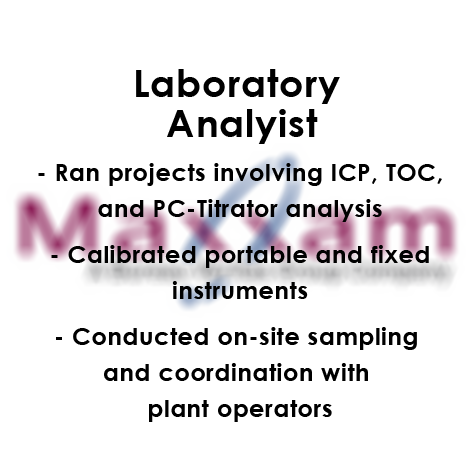
<style>
.page{position:relative;width:474px;height:474px;background:#ffffff}
.page>*{position:absolute;margin:0}
.t1{font:38px/40px "CenturyGothic-Bold";letter-spacing:0.025em;color:#000000}
.t2{font:24px/36px "CenturyGothic-Bold";letter-spacing:0.025em;color:#000000}
.t3{font:24px/36px "CenturyGothic";letter-spacing:0.025em;color:#000000}
</style>
<div class="page">
<p class="t1" style="left:136px;top:69px;width:204px;height:75px;text-align:center">Laboratory <br>Analyist</p>
<p class="t2" style="left:38px;top:163px;width:404px;height:259px;text-align:center"><span class="t3"> </span>- Ran projects involving ICP, TOC, <br>and PC-Titrator analysis<br>                    <br>- Calibrated portable and fixed<br>instruments<br>                     <br>- Conducted on-site sampling <br>and coordination with <br>plant operators</p>
</div>
